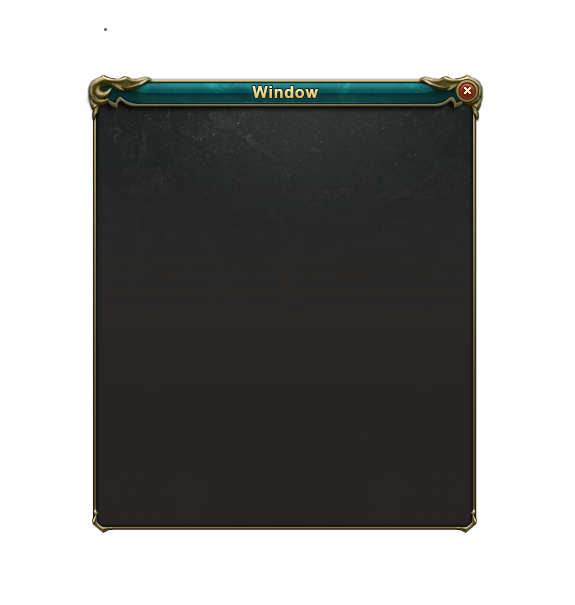
<style>
.page{position:relative;width:575px;height:605px;background:#ffffff}
.page>*{position:absolute;margin:0}
.t1{font:16px "Arial-BoldMT";letter-spacing:0.05em}
</style>
<div class="page">
<p class="t1" style="left:252px;top:86px;width:66px;height:12px">Window</p>
</div>
